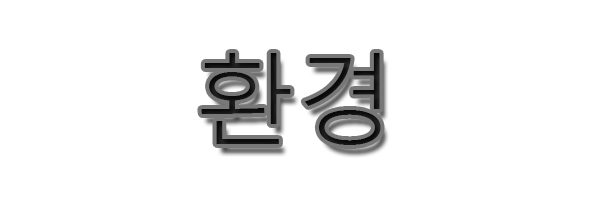
<style>
.page{position:relative;width:600px;height:200px;background:#ffffff}
.page>*{position:absolute;margin:0}
.t1{font:100px "MalgunGothic-Semilight";color:#111111}
</style>
<div class="page">
<p class="t1" style="left:201px;top:53px;width:180px;height:92px">환경</p>
</div>
